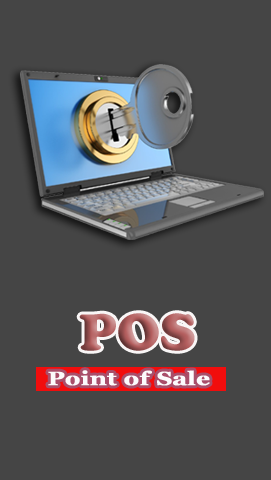
<style>
.page{position:relative;width:271px;height:480px;background:#454545}
.page>*{position:absolute;margin:0}
.t1{font:54px "CooperBlack"}
.t2{font:19.2px "Georgia-Bold";color:#fcfafc;font-weight:bold;scale:1.24 1}
</style>
<div class="page">
<p class="t1" style="left:79px;top:313px;width:116px;height:38px">POS</p>
<p class="t2" style="left:48px;top:370px;width:162px;height:16px">Point of Sale</p>
</div>
